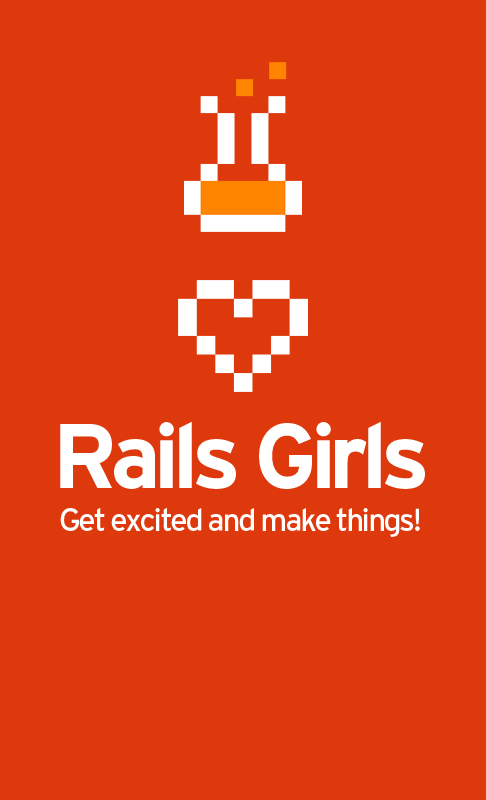
<style>
.page{position:relative;width:486px;height:800px;background:#dd390d}
.page>*{position:absolute;margin:0}
.t1{font:91.2px "Interstate-Bold";letter-spacing:-0.075em;color:#ffffff}
.t2{font:31.7px "Interstate-Regular";letter-spacing:-0.075em;color:#ffffff}
</style>
<div class="page">
<p class="t1" style="left:60px;top:421px;width:365px;height:68px">Rails Girls</p>
<p class="t2" style="left:60px;top:508px;width:360px;height:29px">Get excited and make things!</p>
</div>
